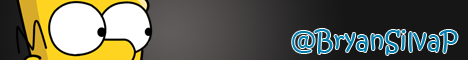
<style>
.page{position:relative;width:468px;height:60px;background:#161616}
.page>*{position:absolute;margin:0}
.t1{font:25px "KristenITC-Regular";color:#007fae}
</style>
<div class="page">
<p class="t1" style="left:292px;top:29px;width:166px;height:26px">@BryanSilvaP</p>
</div>
